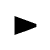
<style>
.page{position:relative;width:50px;height:50px;background:#ffffff}
.page>*{position:absolute;margin:0}
.t1{font:39.5px "ArialMT";color:#000000;scale:1.16 1}
</style>
<div class="page">
<p class="t1" style="left:14px;top:16px;width:23px;height:19px">&gt;</p>
</div>
